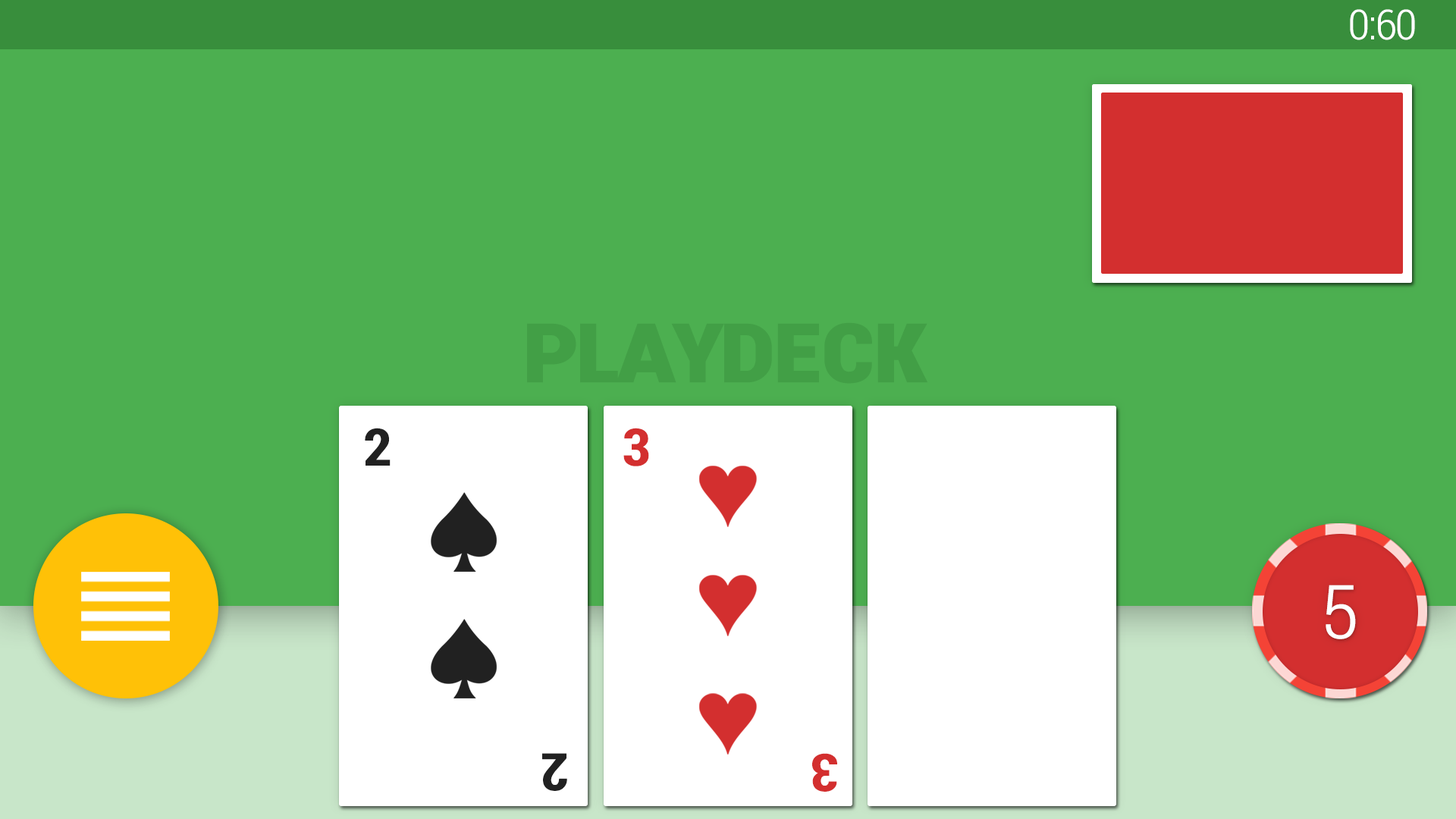
<style>
.page{position:relative;width:1456px;height:819px;background:#4caf50}
.page>*{position:absolute;margin:0}
.t1{font:41.2px "RobotoCondensed-Light";letter-spacing:-0.04em;color:#ffffff;font-variant:small-caps;scale:1.12 1}
.t2{font:103px "RobotoCondensed-Bold";letter-spacing:-0.04em;color:#388e3c;font-variant:small-caps;scale:1.11 1}
.t3{font:51.6px "RobotoCondensed-Bold";letter-spacing:-0.04em;color:#212121;font-variant:small-caps;scale:1.12 1}
.t4{font:51.6px "RobotoCondensed-Bold";letter-spacing:-0.04em;color:#d32f2f;font-variant:small-caps;scale:1.12 1}
.t5{font:74.4px "RobotoCondensed-Light";letter-spacing:-0.04em;color:#ffffff;font-variant:small-caps;scale:1.12 1}
.t6{font:51.8px "RobotoCondensed-Bold";letter-spacing:-0.04em;color:#212121;font-variant:small-caps;scale:1.11 1}
.t7{font:51.8px "RobotoCondensed-Bold";letter-spacing:-0.04em;color:#d32f2f;font-variant:small-caps;scale:1.12 1}
</style>
<div class="page">
<p class="t1" style="left:1350px;top:9px;width:65px;height:31px">0:60</p>
<p class="t2" style="left:527px;top:322px;width:400px;height:62px;opacity:0.5">PLAYDECK</p>
<p class="t3" style="left:365px;top:428px;width:26px;height:38px">2</p>
<p class="t4" style="left:623px;top:428px;width:26px;height:38px">3</p>
<p class="t5" style="left:1326px;top:585px;width:30px;height:54px">5</p>
<p class="t6" style="left:542px;top:753px;width:25px;height:38px;rotate:180deg">2</p>
<p class="t7" style="left:812px;top:753px;width:25px;height:39px;rotate:180deg">3</p>
</div>
